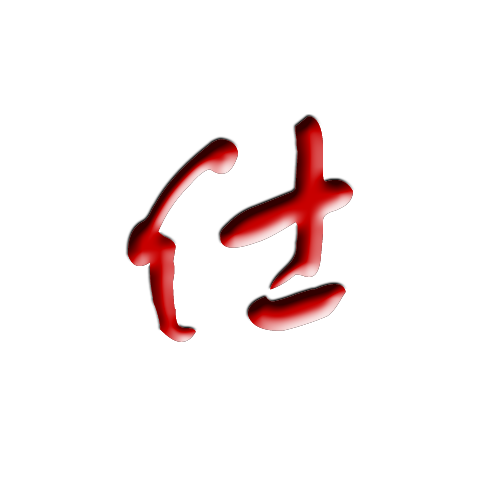
<style>
.page{position:relative;width:500px;height:500px;background:#ffffff}
.page>*{position:absolute;margin:0}
.t1{font:320px "FZSTK--GBK1-0"}
</style>
<div class="page">
<p class="t1" style="left:127px;top:116px;width:226px;height:226px">仕</p>
</div>
